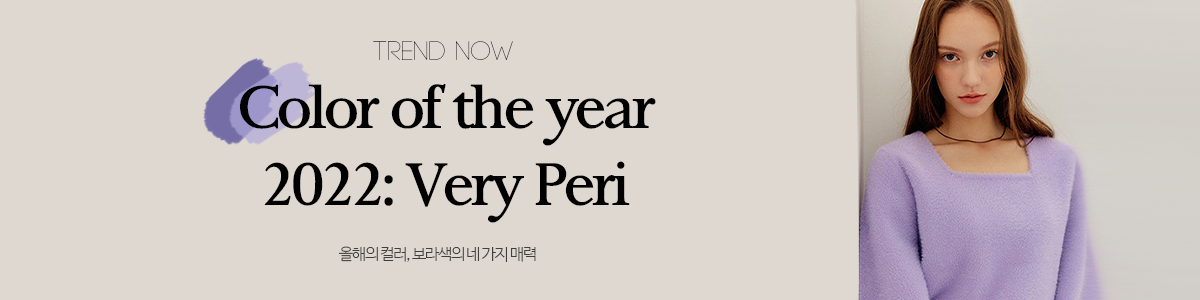
<style>
.page{position:relative;width:1200px;height:300px;background:#dfd8d0}
.page>*{position:absolute;margin:0}
.t1{font:26px "Code-Light";letter-spacing:0.01em}
.t2{font:58px "Palermo";letter-spacing:-0.05em;color:#000000}
.t3{font:58px "Palermo";letter-spacing:-0.06em;color:#000000}
.t4{font:16px "NanumBarunGothicLight";letter-spacing:-0.08em;color:#3f3f3f}
</style>
<div class="page">
<p class="t1" style="left:373px;top:41px;width:140px;height:19px">TREND NOW</p>
<p class="t2" style="left:240px;top:83px;width:416px;height:63px">Color of the year</p>
<p class="t2" style="left:264px;top:161px;width:366px;height:62px"><span class="t3">2022</span>: Very Peri</p>
<p class="t4" style="left:339px;top:246px;width:197px;height:16px">올해의 컬러, 보라색의 네 가지 매력</p>
</div>
